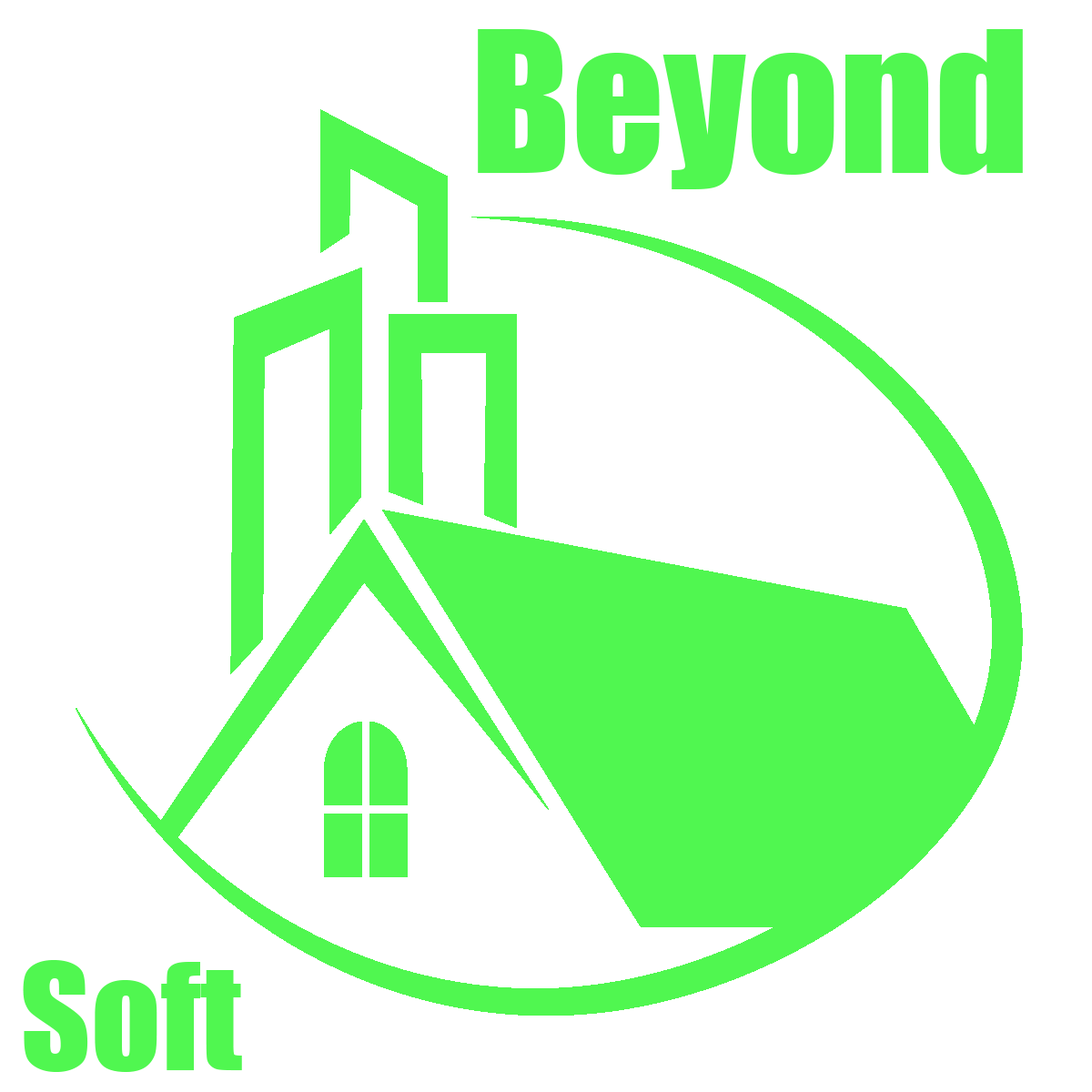
<style>
.page{position:relative;width:1092px;height:1092px;background:#ffffff}
.page>*{position:absolute;margin:0}
.t1{font:182px "Impact";color:#50f750}
.t2{font:136.5px "Impact";color:#50f750}
</style>
<div class="page">
<p class="t1" style="left:478px;top:29px;width:545px;height:160px">Beyond</p>
<p class="t2" style="left:23px;top:960px;width:219px;height:112px">Soft</p>
</div>
